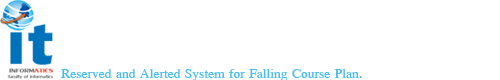
<style>
.page{position:relative;width:500px;height:80px;background:#ffffff}
.page>*{position:absolute;margin:0}
.t1{font:19.9px "EucrosiaUPC";color:#48bdee}
</style>
<div class="page">
<p class="t1" style="left:61px;top:69px;width:301px;height:12px">Reserved and Alerted System for Falling Course Plan.</p>
</div>
